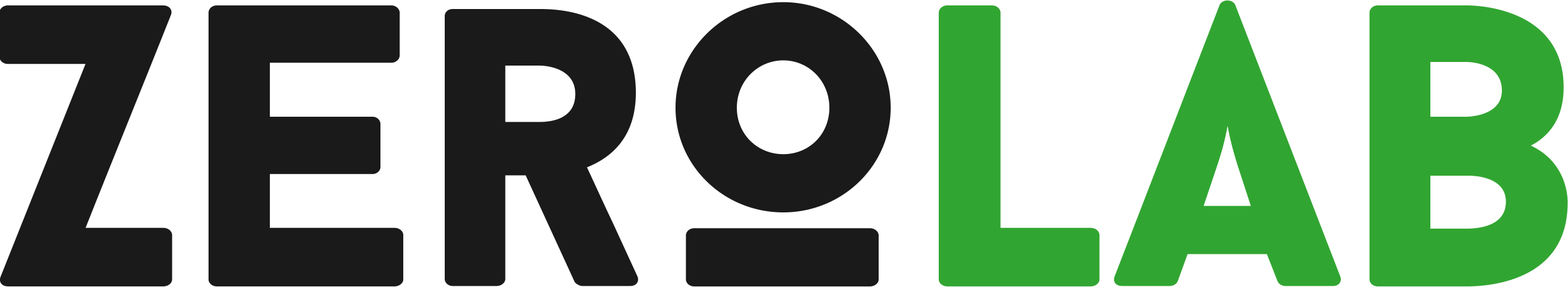
<style>
.page{position:relative;width:1568px;height:287px;background:#ffffff}
.page>*{position:absolute;margin:0}
.t1{font:400.7px "BaronNeueBlack";color:#1a1a1a}
.t2{font:400.7px "BaronNeueBlack";color:#31a531}
</style>
<div class="page">
<p class="t1" style="left:0px;top:0px;width:1568px;height:287px">ZErO<span class="t2">LaB</span></p>
</div>
